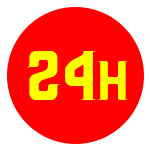
<style>
.page{position:relative;width:150px;height:150px;background:#ff0000}
.page>*{position:absolute;margin:0}
.t1{font:32.3px "Thailandesa";color:#fcff00}
.t2{font:52px "Thailandesa";color:#fcff00}
</style>
<div class="page">
<p class="t1" style="left:27px;top:51px;width:101px;height:49px">24<span class="t2">h</span></p>
</div>
